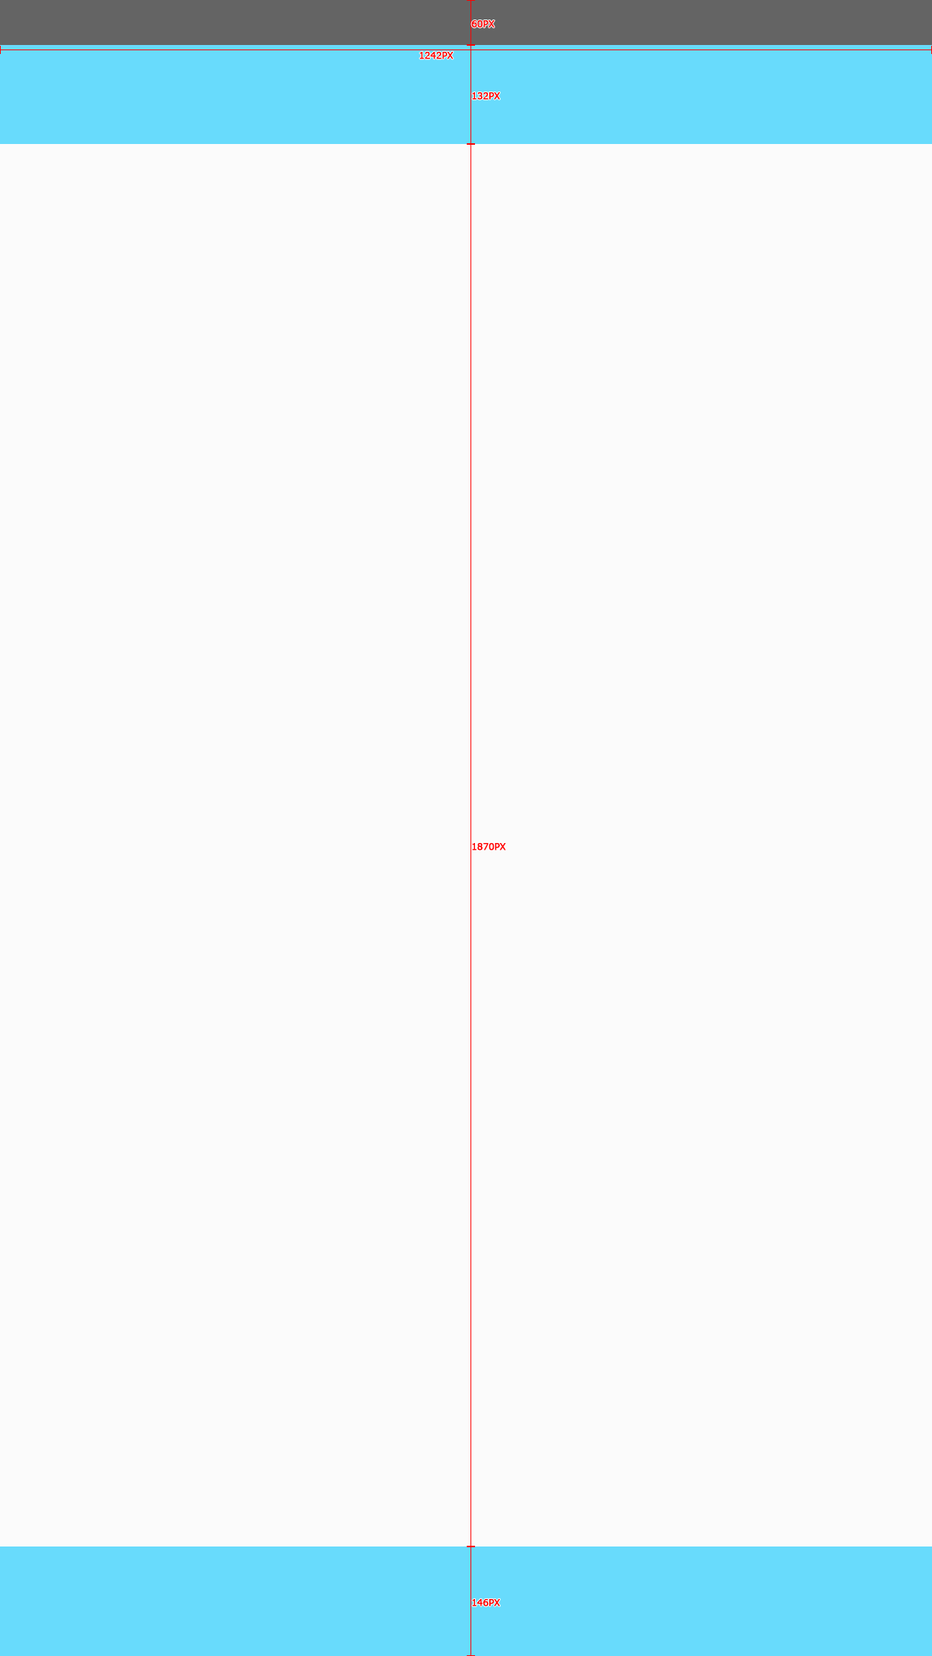
<style>
.page{position:relative;width:932px;height:1656px;background:#fbfbfb}
.page>*{position:absolute;margin:0}
.t1{font:9px "Verdana";color:#ff0000;font-weight:bold}
</style>
<div class="page">
<p class="t1" style="left:471px;top:20px;width:23px;height:8px">60PX</p>
<p class="t1" style="left:419px;top:52px;width:34px;height:7px">1242PX</p>
<p class="t1" style="left:472px;top:92px;width:28px;height:8px">132PX</p>
<p class="t1" style="left:472px;top:843px;width:34px;height:7px">1870PX</p>
<p class="t1" style="left:472px;top:1599px;width:28px;height:7px">146PX</p>
</div>
